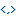
<style>
.page{position:relative;width:16px;height:16px;background:#ffffff}
.page>*{position:absolute;margin:0}
.t1{font:10px "Small Fonts";color:#005999}
</style>
<div class="page">
<p class="t1" style="left:0px;top:6px;width:16px;height:8px">&lt; , &gt;</p>
</div>
